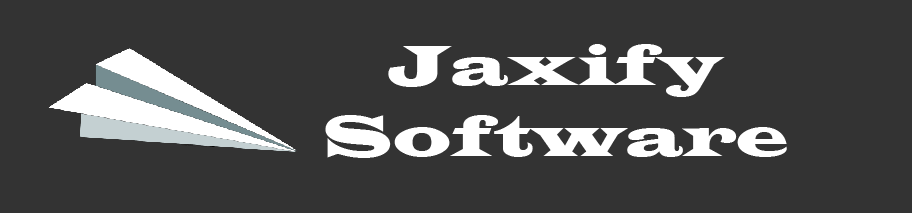
<style>
.page{position:relative;width:912px;height:213px;background:#333333}
.page>*{position:absolute;margin:0}
.t1{font:59.2px "LatinWide";color:#ffffff}
</style>
<div class="page">
<p class="t1" style="left:325px;top:44px;width:462px;height:114px;text-align:center">Jaxify<br>Software</p>
</div>
